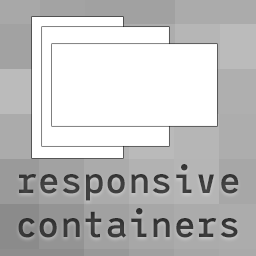
<style>
.page{position:relative;width:256px;height:256px;background:#ffffff}
.page>*{position:absolute;margin:0}
.t1{font:37px "LeagueMono-Medium";letter-spacing:0.01em;color:#3a3a3a}
</style>
<div class="page">
<p class="t1" style="left:18px;top:164px;width:221px;height:74px;text-align:center">responsive<br>containers</p>
</div>
